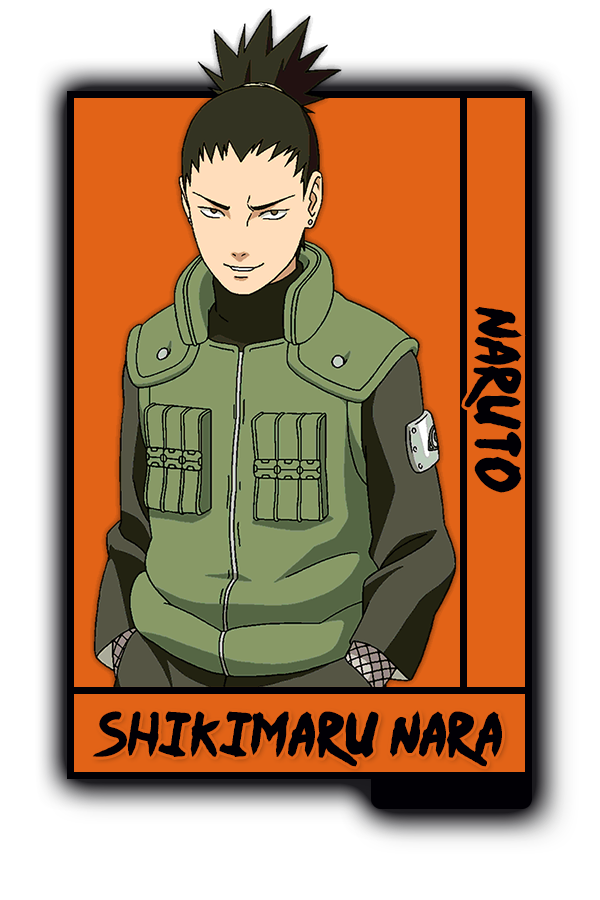
<style>
.page{position:relative;width:600px;height:900px;background:#e26317}
.page>*{position:absolute;margin:0}
.t1{font:52px "Ninja-Naruto";color:#010005}
.t2{font:50.5px "Ninja-Naruto";color:#010005}
</style>
<div class="page">
<p class="t1" style="left:464px;top:307px;width:59px;height:186px;rotate:90deg">Naruto</p>
<p class="t2" style="left:92px;top:710px;width:410px;height:57px">Shikimaru Nara</p>
</div>
